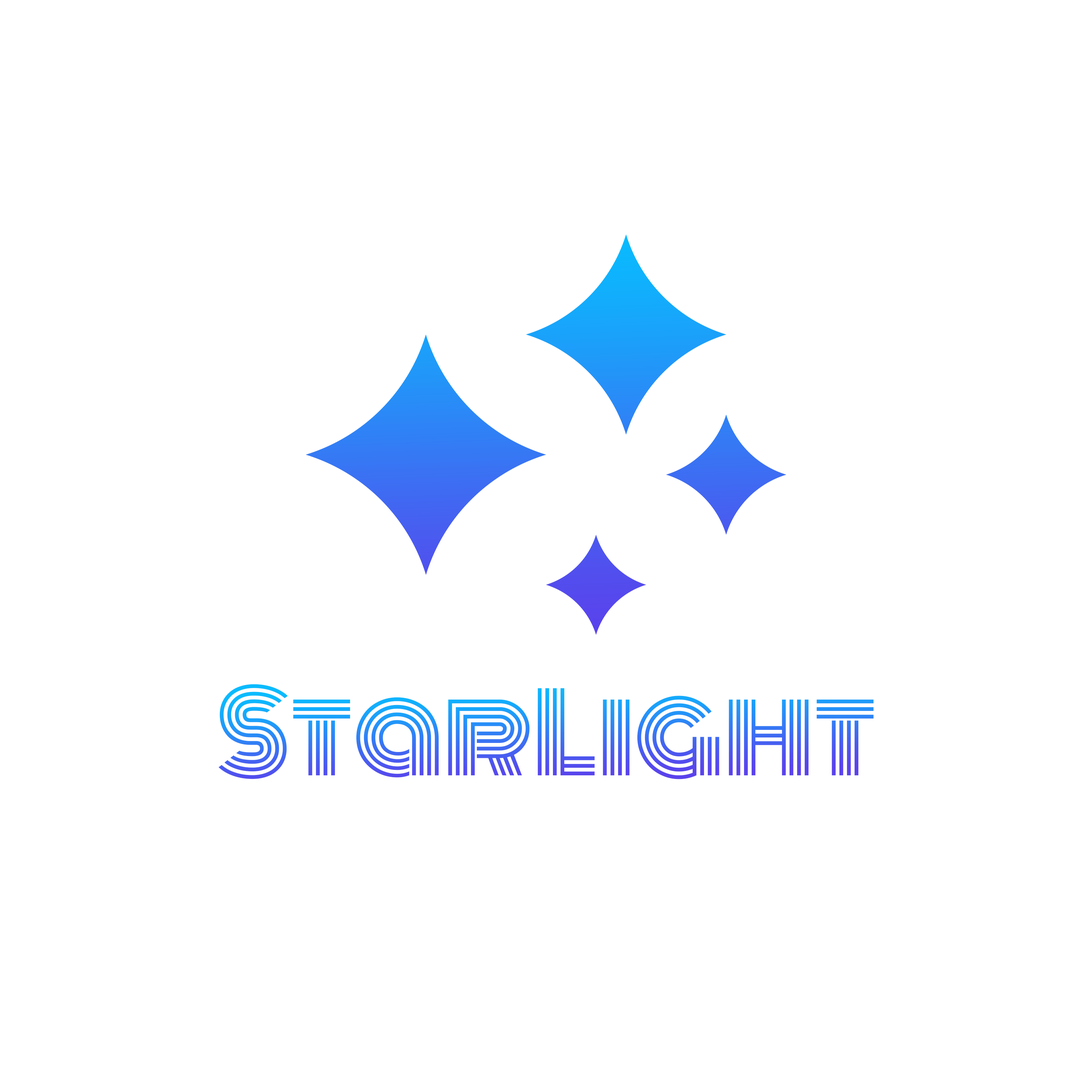
<style>
.page{position:relative;width:1092px;height:1092px;background:#ffffff}
.page>*{position:absolute;margin:0}
.t1{font:107.8px "Monoton-Regular"}
</style>
<div class="page">
<p class="t1" style="left:218px;top:684px;width:656px;height:95px">StarLight</p>
</div>
